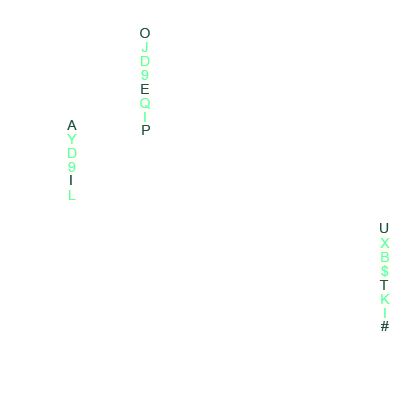
<style>
.page{position:relative;width:400px;height:400px;background:#ffffff}
.page>*{position:absolute;margin:0}
.t1{font:14px "ArialUnicodeMS";color:#20523d}
.t2{font:14px/14px "ArialUnicodeMS";color:#5cffbb}
.t3{font:14px/14px "ArialUnicodeMS";color:#20523d}
.t4{font:14px "ArialUnicodeMS"}
</style>
<div class="page">
<p class="t1" style="left:140px;top:28px;width:10px;height:10px">O</p>
<p class="t2" style="left:140px;top:42px;width:10px;height:80px;text-align:center"><span class="t3"><br></span>J<br>D<br>9<br><br>Q<br>I</p>
<p class="t1" style="left:141px;top:84px;width:8px;height:10px">E</p>
<p class="t1" style="left:67px;top:120px;width:10px;height:10px">A</p>
<p class="t1" style="left:142px;top:125px;width:8px;height:10px">P</p>
<p class="t2" style="left:67px;top:134px;width:10px;height:66px;text-align:center"><span class="t3"><br></span>Y<br>D<br>9<br><br>L</p>
<p class="t4" style="left:70px;top:175px;width:2px;height:10px">I</p>
<p class="t1" style="left:380px;top:223px;width:9px;height:10px">U</p>
<p class="t2" style="left:380px;top:238px;width:10px;height:80px;text-align:center"><span class="t3"><br></span>X<br>B<br>$<br><br>K<br>I</p>
<p class="t1" style="left:379px;top:280px;width:10px;height:10px">T</p>
<p class="t1" style="left:381px;top:321px;width:8px;height:10px">#</p>
</div>
